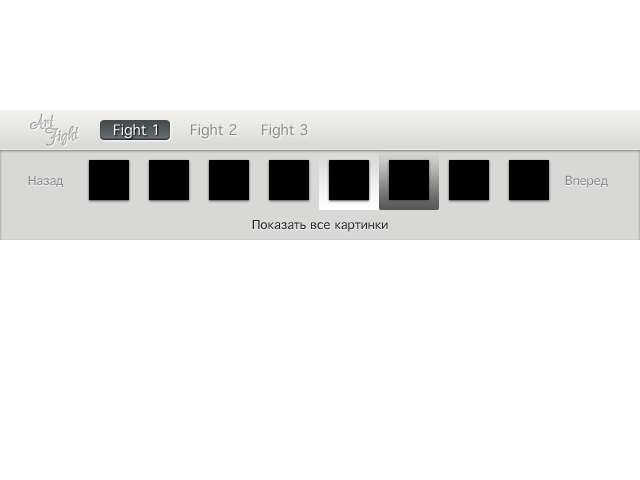
<style>
.page{position:relative;width:640px;height:480px;background:#ffffff}
.page>*{position:absolute;margin:0}
.t1{font:18px "akaDora";color:#ababab}
.t2{font:18px "akaDora";color:#b6b6b6}
.t3{font:14px "Geneva";color:#ffffff}
.t4{font:14px "Geneva";color:#898989}
.t5{font:12px "Geneva";color:#898989}
.t6{font:12px "Geneva";color:#252525}
</style>
<div class="page">
<p class="t1" style="left:30px;top:113px;width:24px;height:17px;rotate:-7deg">Art</p>
<p class="t1" style="left:30px;top:113px;width:24px;height:17px;rotate:-7deg">Art</p>
<p class="t2" style="left:45px;top:126px;width:34px;height:20px;rotate:-7deg">Fight</p>
<p class="t2" style="left:45px;top:126px;width:34px;height:20px;rotate:-7deg">Fight</p>
<p class="t3" style="left:114px;top:124px;width:43px;height:15px">Fight 1</p>
<p class="t4" style="left:191px;top:124px;width:46px;height:15px">Fight 2</p>
<p class="t4" style="left:262px;top:124px;width:46px;height:15px">Fight 3</p>
<p class="t5" style="left:28px;top:176px;width:35px;height:12px">Назад</p>
<p class="t5" style="left:565px;top:175px;width:43px;height:13px">Вперед</p>
<p class="t6" style="left:252px;top:220px;width:136px;height:12px">Показать все картинки</p>
</div>
